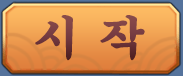
<style>
.page{position:relative;width:183px;height:76px}
.page>*{position:absolute;margin:0}
.t1{font:48px "MJemokBatang";letter-spacing:0.34em;color:#763c42;font-weight:bold}
</style>
<div class="page">
<p class="t1" style="left:35px;top:15px;width:110px;height:46px">시작</p>
</div>
